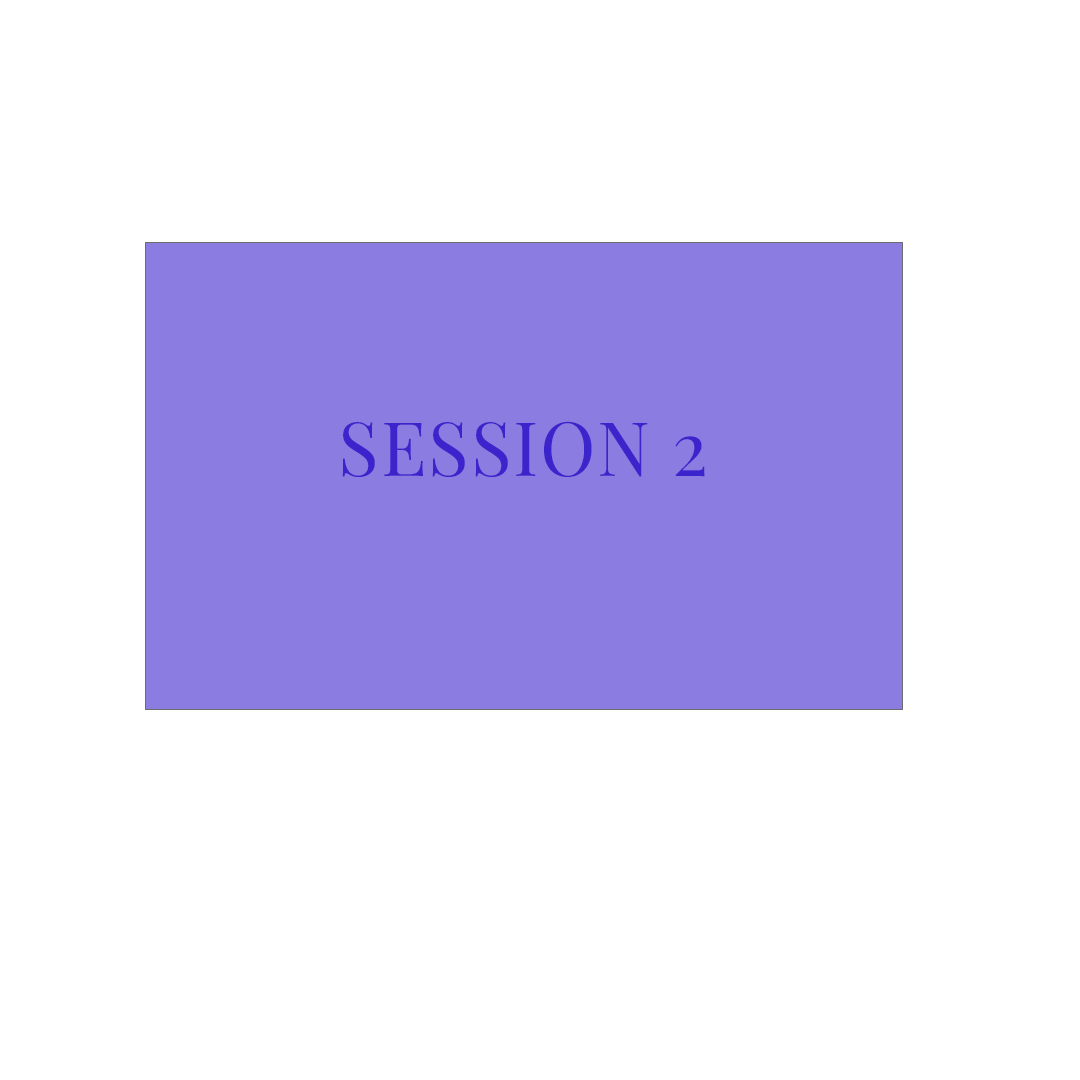
<style>
.page{position:relative;width:1080px;height:1080px;background:#ffffff}
.page>*{position:absolute;margin:0}
.t1{font:75px "PlayfairDisplaySC-Regular";letter-spacing:0.025em;color:#3c24cc}
</style>
<div class="page">
<p class="t1" style="left:342px;top:421px;width:363px;height:56px">SESSION 2</p>
</div>
